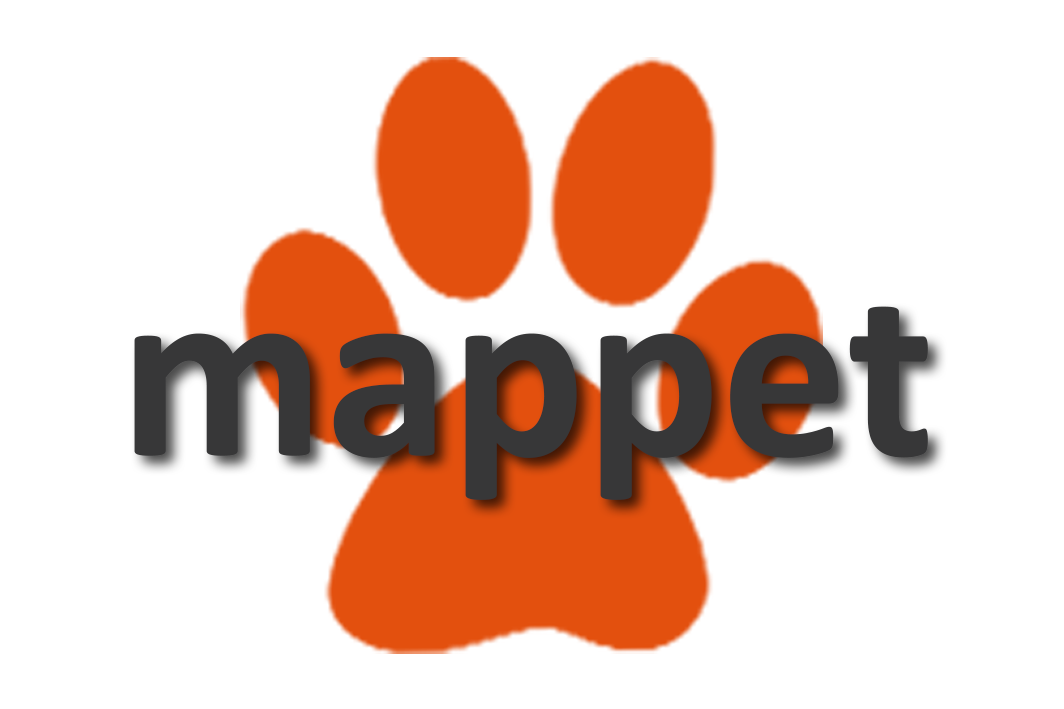
<style>
.page{position:relative;width:1064px;height:709px;background:#ffffff}
.page>*{position:absolute;margin:0}
.t1{font:253.3px "Calibri-Bold";color:#373738}
</style>
<div class="page">
<p class="t1" style="left:134px;top:306px;width:794px;height:194px">mappet</p>
</div>
